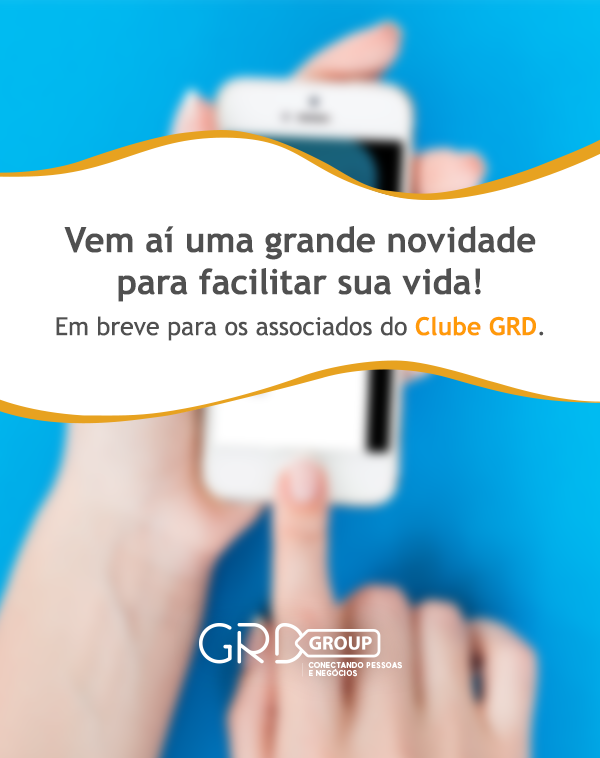
<style>
.page{position:relative;width:600px;height:758px;background:#ffffff}
.page>*{position:absolute;margin:0}
.t1{font:35px "TrebuchetMS-Bold";color:#505050}
.t2{font:25px/41px "TrebuchetMS";color:#505050}
.t3{font:25px/41px "TrebuchetMS-Bold";color:#ff9a09}
</style>
<div class="page">
<p class="t1" style="left:56px;top:226px;width:488px;height:115px;text-align:center">Vem aí uma grande novidade<br>para facilitar sua vida!<br><span class="t2">Em breve para os associados do </span><span class="t3">Clube GRD</span><span class="t2">.</span></p>
</div>
